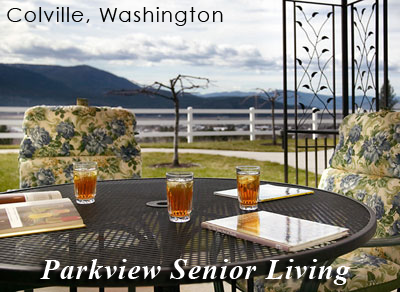
<style>
.page{position:relative;width:400px;height:292px}
.page>*{position:absolute;margin:0}
.t1{font:20.4px "CenturyGothic";letter-spacing:0.05em;color:#000000}
.t2{font:28.6px "TimesNewRomanPS-BoldItalicMT";letter-spacing:0.05em;color:#ffffff}
</style>
<div class="page">
<p class="t1" style="left:7px;top:7px;width:216px;height:19px">Colville, Washington</p>
<p class="t2" style="left:40px;top:259px;width:310px;height:26px">Parkview Senior Living</p>
</div>
